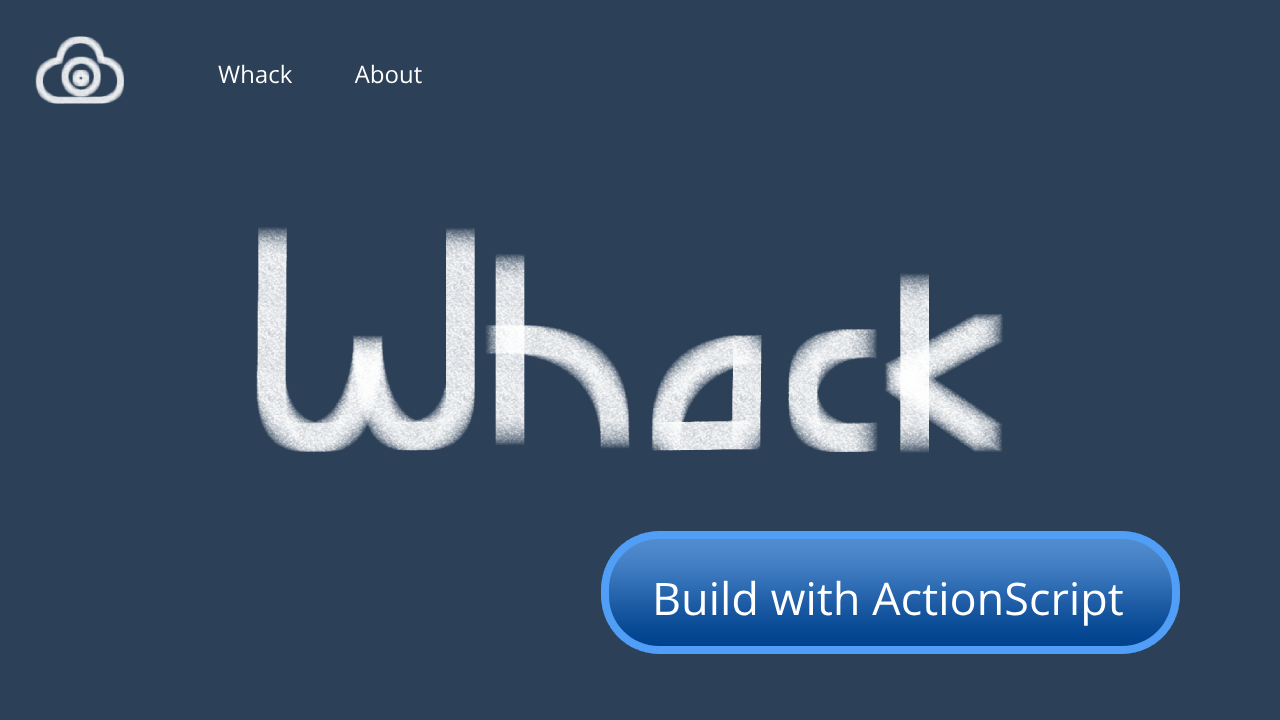
<style>
.page{position:relative;width:1280px;height:720px;background:#2c4057}
.page>*{position:absolute;margin:0}
.t1{font:24px "OpenSans-Regular";color:#ffffff}
.t2{font:45px "OpenSans-Regular";color:#ffffff}
</style>
<div class="page">
<p class="t1" style="left:218px;top:64px;width:204px;height:20px">Whack          About</p>
<p class="t2" style="left:656px;top:580px;width:467px;height:46px">Build with ActionScript</p>
</div>
